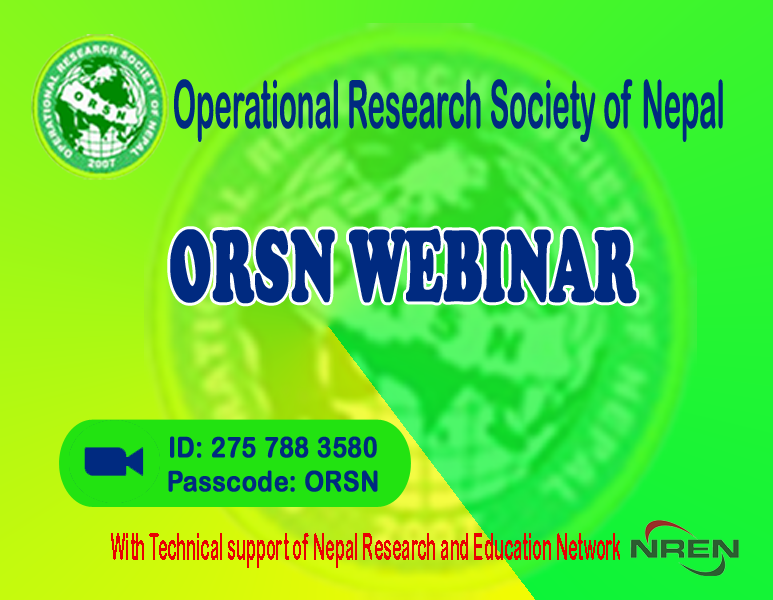
<style>
.page{position:relative;width:773px;height:600px}
.page>*{position:absolute;margin:0}
.t1{font:66.7px "ArialRoundedMTBold";color:#002a80;scale:0.44 1}
.t2{font:104px "CooperBlack";color:#002a80;font-weight:bold;scale:0.51 1}
.t3{font:28.2px "ArialRoundedMTBold";color:#002a80;font-weight:bold;scale:0.88 1}
.t4{font:37.6px "ArialRoundedMTBold";color:#e90101;scale:0.43 1}
</style>
<div class="page">
<p class="t1" style="left:174px;top:79px;width:549px;height:63px">Operational Research Society of Nepal</p>
<p class="t2" style="left:170px;top:228px;width:467px;height:76px">ORSN WEBINAR</p>
<p class="t3" style="left:168px;top:436px;width:210px;height:56px;text-align:center">ID: 275 788 3580<br>Passcode: ORSN</p>
<p class="t4" style="left:111px;top:533px;width:509px;height:35px">With Technical support of Nepal Research and Education Network</p>
</div>
